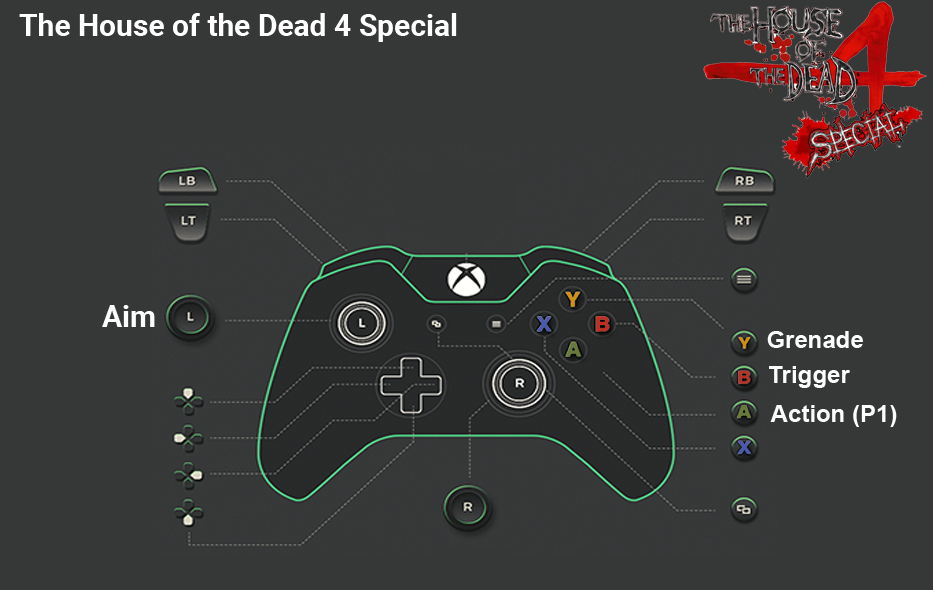
<style>
.page{position:relative;width:933px;height:590px;background:#363838}
.page>*{position:absolute;margin:0}
.t1{font:30px "Roboto-Bold";color:#ffffff}
.t2{font:30px "Roboto-Bold";color:#fefefe}
.t3{font:24px "Arial-BoldMT";color:#fefefe}
</style>
<div class="page">
<p class="t1" style="left:19px;top:13px;width:438px;height:29px">The House of the Dead 4 Special</p>
<p class="t2" style="left:102px;top:305px;width:53px;height:22px">Aim</p>
<p class="t3" style="left:767px;top:331px;width:96px;height:17px">Grenade</p>
<p class="t3" style="left:769px;top:366px;width:81px;height:22px">Trigger</p>
<p class="t3" style="left:770px;top:405px;width:127px;height:22px">Action (P1)</p>
</div>
